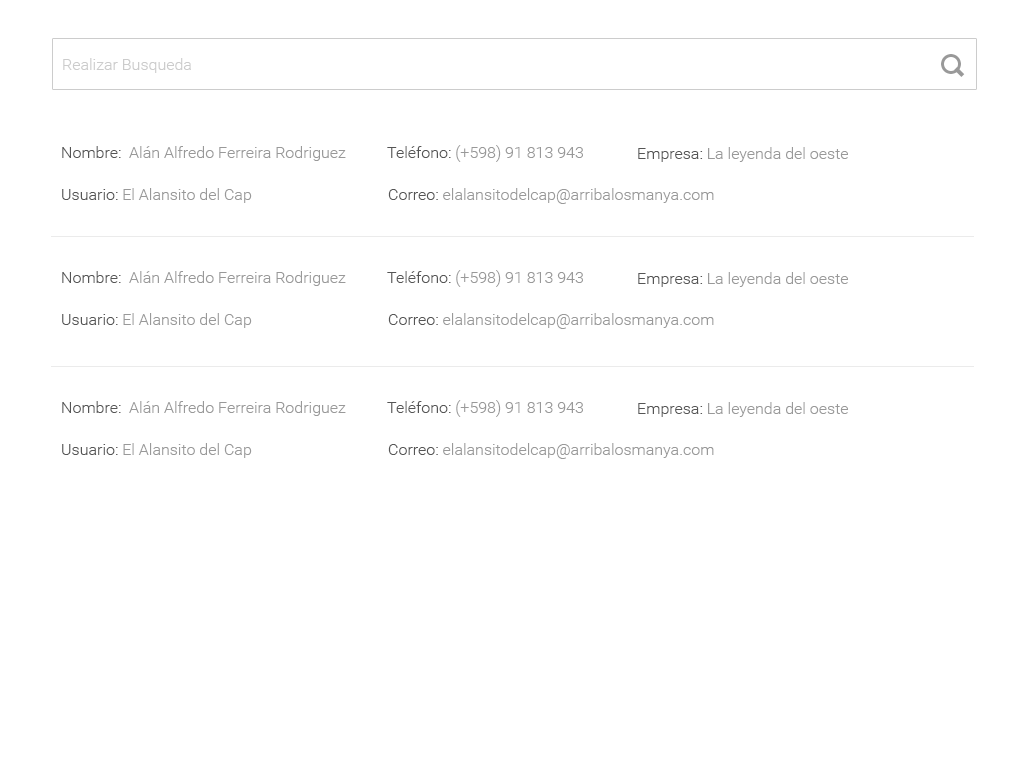
<style>
.page{position:relative;width:1024px;height:768px;background:#ffffff}
.page>*{position:absolute;margin:0}
.t1{font:16px "Roboto-Light";color:#cccccc}
.t2{font:16px "Roboto-Light";color:#999999}
.t3{font:16px "Roboto-Light";color:#555555}
</style>
<div class="page">
<p class="t1" style="left:63px;top:58px;width:128px;height:15px">Realizar Busqueda</p>
<p class="t2" style="left:62px;top:146px;width:284px;height:15px"><span class="t3">Nombre:</span>  Alán Alfredo Ferreira Rodriguez</p>
<p class="t2" style="left:387px;top:145px;width:196px;height:17px"><span class="t3">Teléfono: </span>(+598) 91 813 943</p>
<p class="t2" style="left:638px;top:147px;width:210px;height:15px"><span class="t3">Empresa: </span>La leyenda del oeste</p>
<p class="t2" style="left:62px;top:188px;width:190px;height:15px"><span class="t3">Usuario: </span>El Alansito del Cap</p>
<p class="t2" style="left:388px;top:188px;width:326px;height:16px"><span class="t3">Correo: </span>elalansitodelcap@arribalosmanya.com</p>
<p class="t2" style="left:387px;top:270px;width:196px;height:17px"><span class="t3">Teléfono: </span>(+598) 91 813 943</p>
<p class="t2" style="left:62px;top:271px;width:284px;height:15px"><span class="t3">Nombre:</span>  Alán Alfredo Ferreira Rodriguez</p>
<p class="t2" style="left:638px;top:272px;width:210px;height:15px"><span class="t3">Empresa: </span>La leyenda del oeste</p>
<p class="t2" style="left:62px;top:313px;width:190px;height:15px"><span class="t3">Usuario: </span>El Alansito del Cap</p>
<p class="t2" style="left:388px;top:313px;width:326px;height:16px"><span class="t3">Correo: </span>elalansitodelcap@arribalosmanya.com</p>
<p class="t2" style="left:62px;top:401px;width:284px;height:15px"><span class="t3">Nombre:</span>  Alán Alfredo Ferreira Rodriguez</p>
<p class="t2" style="left:387px;top:400px;width:196px;height:17px"><span class="t3">Teléfono: </span>(+598) 91 813 943</p>
<p class="t2" style="left:638px;top:402px;width:210px;height:15px"><span class="t3">Empresa: </span>La leyenda del oeste</p>
<p class="t2" style="left:62px;top:443px;width:190px;height:15px"><span class="t3">Usuario: </span>El Alansito del Cap</p>
<p class="t2" style="left:388px;top:443px;width:326px;height:16px"><span class="t3">Correo: </span>elalansitodelcap@arribalosmanya.com</p>
</div>
